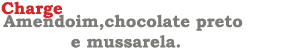
<style>
.page{position:relative;width:300px;height:50px;background:#ffffff}
.page>*{position:absolute;margin:0}
.t1{font:17px "BookmanOldStyle-Bold";color:#d42525}
.t2{font:17px "BookmanOldStyle-Bold";color:#7c7c79}
</style>
<div class="page">
<p class="t1" style="left:1px;top:1px;width:62px;height:17px">Charge</p>
<p class="t2" style="left:3px;top:14px;width:240px;height:34px;text-align:center">Amendoim,chocolate preto <br>e mussarela.</p>
</div>
